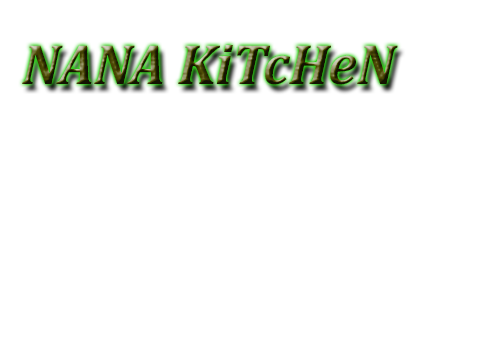
<style>
.page{position:relative;width:480px;height:343px;background:#ffffff}
.page>*{position:absolute;margin:0}
.t1{font:57.2px "Cambria-BoldItalic"}
</style>
<div class="page">
<p class="t1" style="left:22px;top:45px;width:376px;height:40px">NANA KiTcHeN</p>
</div>
